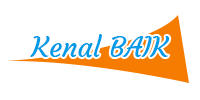
<style>
.page{position:relative;width:200px;height:100px;background:#ffffff}
.page>*{position:absolute;margin:0}
.t1{font:28px "Courgette-Regular";color:#039be5}
</style>
<div class="page">
<p class="t1" style="left:30px;top:34px;width:140px;height:24px">Kenal BAIK</p>
</div>
